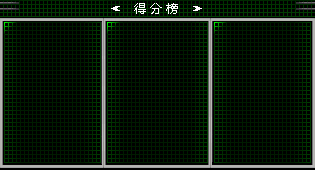
<style>
.page{position:relative;width:315px;height:170px;background:#000000}
.page>*{position:absolute;margin:0}
.t1{font:12px "MicrosoftYaHei";color:#ffffff}
</style>
<div class="page">
<p class="t1" style="left:134px;top:3px;width:44px;height:11px">得 分 榜</p>
</div>
